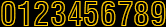
<style>
.page{position:relative;width:166px;height:27px;background:#000000}
.page>*{position:absolute;margin:0}
.t1{font:33.3px "Swiss721BT-BoldCondensedOutline";color:#ffcc00}
</style>
<div class="page">
<p class="t1" style="left:1px;top:1px;width:165px;height:25px">0123456789</p>
</div>
